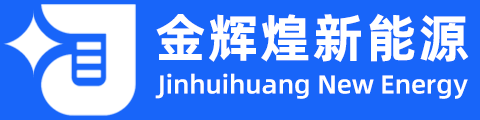
<style>
.page{position:relative;width:480px;height:120px;background:#1865f9}
.page>*{position:absolute;margin:0}
.t1{font:52px "AlibabaPuHuiTiB";letter-spacing:0.03em;color:#ffffff}
.t2{font:26px "AlibabaPuHuiTiM";color:#ffffff}
</style>
<div class="page">
<p class="t1" style="left:156px;top:13px;width:313px;height:49px">金辉煌新能源</p>
<p class="t2" style="left:155px;top:73px;width:313px;height:26px">Jinhuihuang New Energy</p>
</div>
